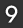
<style>
.page{position:relative;width:23px;height:28px;background:#333333}
.page>*{position:absolute;margin:0}
.t1{font:24px "Outfit-Regular";color:#ffffff;font-weight:bold;font-style:italic}
</style>
<div class="page">
<p class="t1" style="left:5px;top:5px;width:13px;height:18px">9</p>
</div>
